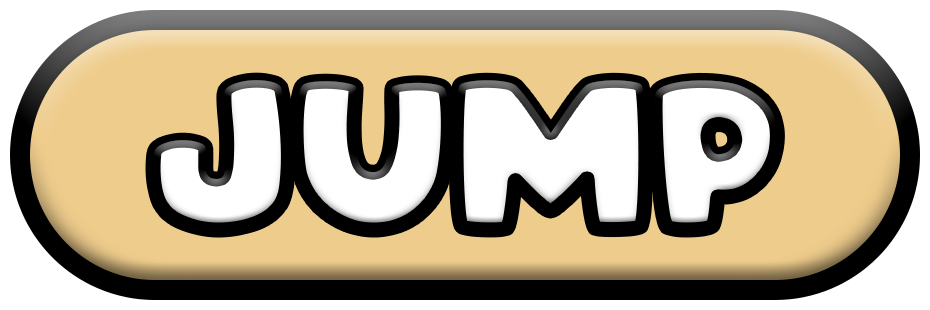
<style>
.page{position:relative;width:930px;height:310px;background:#ffffff}
.page>*{position:absolute;margin:0}
.t1{font:200px "ARCO-Typography-Regular";color:#ffffff}
</style>
<div class="page">
<p class="t1" style="left:153px;top:80px;width:625px;height:150px">jump</p>
</div>
